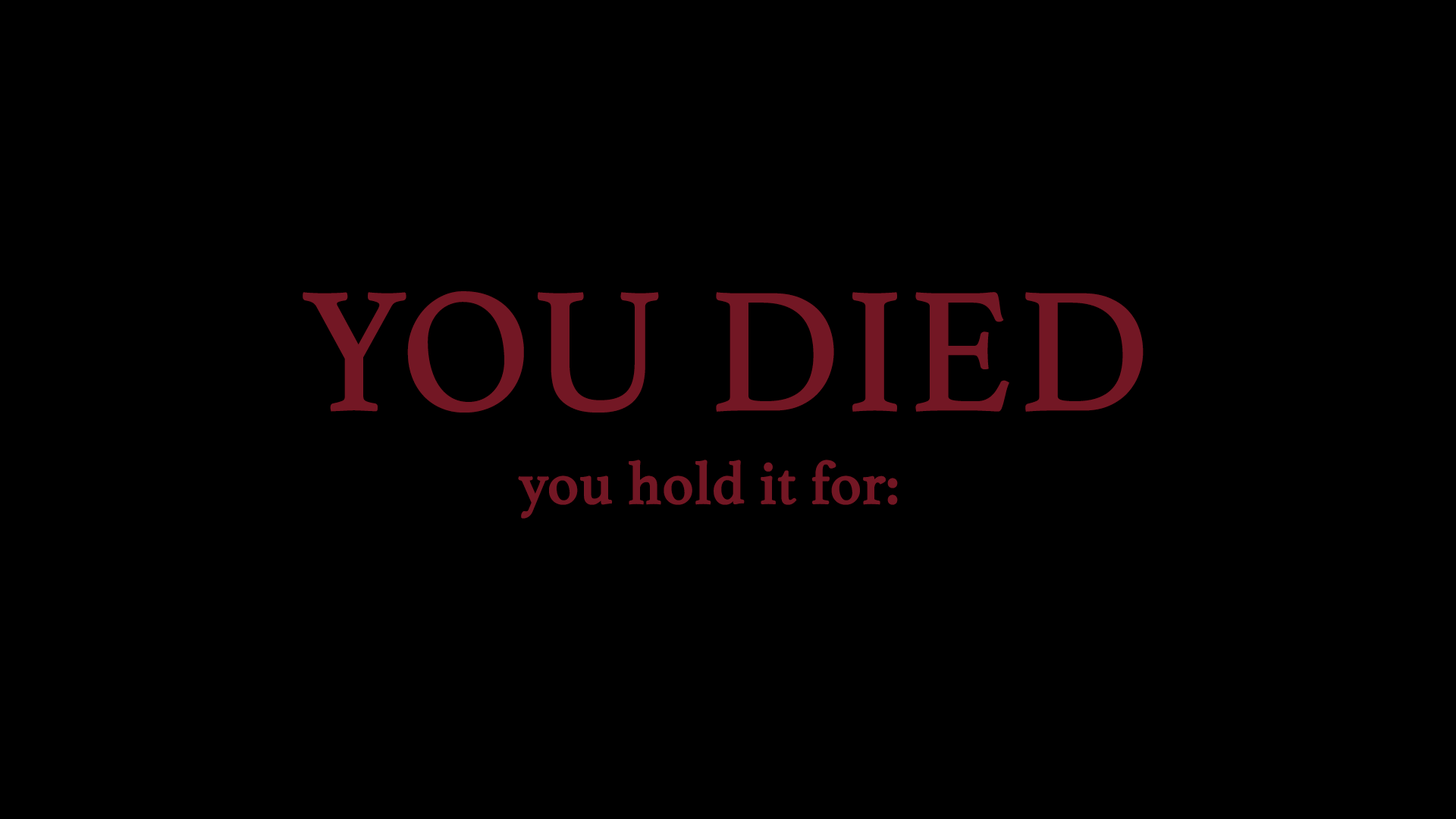
<style>
.page{position:relative;width:1456px;height:819px;background:#000000}
.page>*{position:absolute;margin:0}
.t1{font:177px "Athelas-Regular";color:#731724;font-weight:bold}
.t2{font:59.7px "Athelas-Regular";color:#731724;font-weight:bold}
</style>
<div class="page">
<p class="t1" style="left:303px;top:291px;width:841px;height:122px">YOU DIED</p>
<p class="t2" style="left:518px;top:460px;width:380px;height:59px">you hold it for:</p>
</div>
